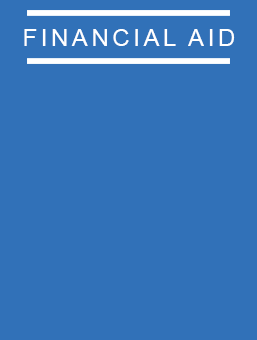
<style>
.page{position:relative;width:257px;height:340px;background:#3171b8}
.page>*{position:absolute;margin:0}
.t1{font:24.2px "ArialMT";letter-spacing:0.15em;color:#ffffff}
</style>
<div class="page">
<p class="t1" style="left:24px;top:29px;width:211px;height:17px">FINANCIAL AID</p>
</div>
